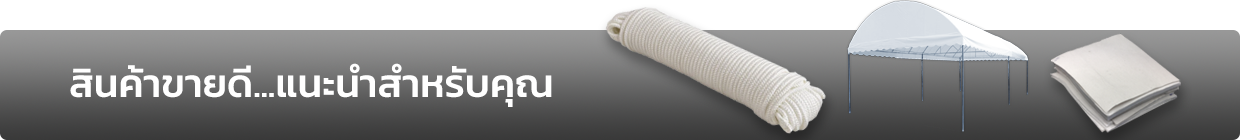
<style>
.page{position:relative;width:1240px;height:140px;background:#ffffff}
.page>*{position:absolute;margin:0}
.t1{font:40px "Kanit-Medium";color:#ffffff}
</style>
<div class="page">
<p class="t1" style="left:70px;top:63px;width:482px;height:44px">สินค้าขายดี...แนะนำสำหรับคุณ</p>
</div>
